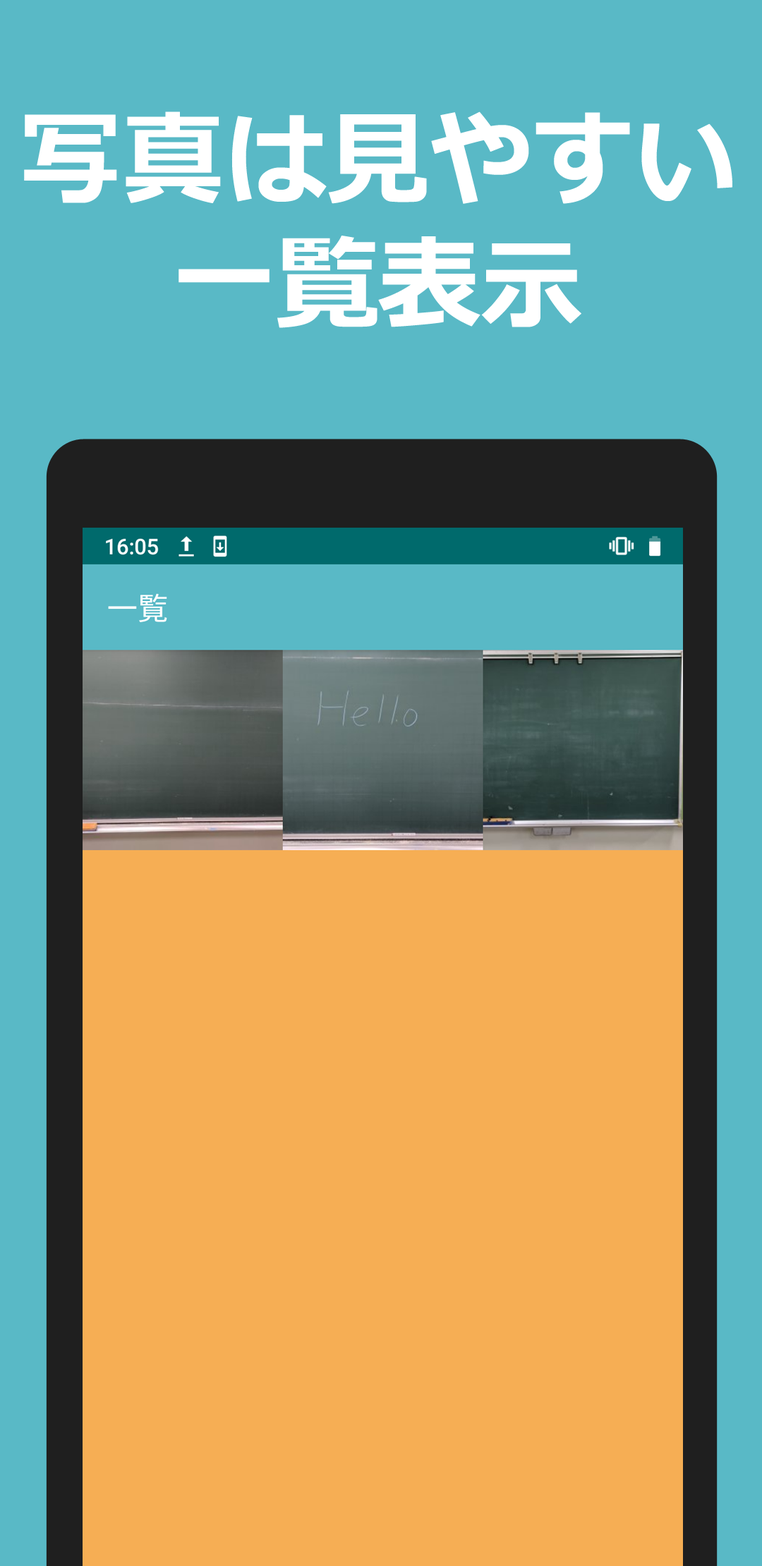
<style>
.page{position:relative;width:762px;height:1566px;background:#59b9c6}
.page>*{position:absolute;margin:0}
.t1{font:102.5px/124.4px "Meiryo-Bold";color:#ffffff}
</style>
<div class="page">
<p class="t1" style="left:24px;top:111px;width:708px;height:217px;text-align:center">写真は見やすい<br>一覧表示</p>
</div>
